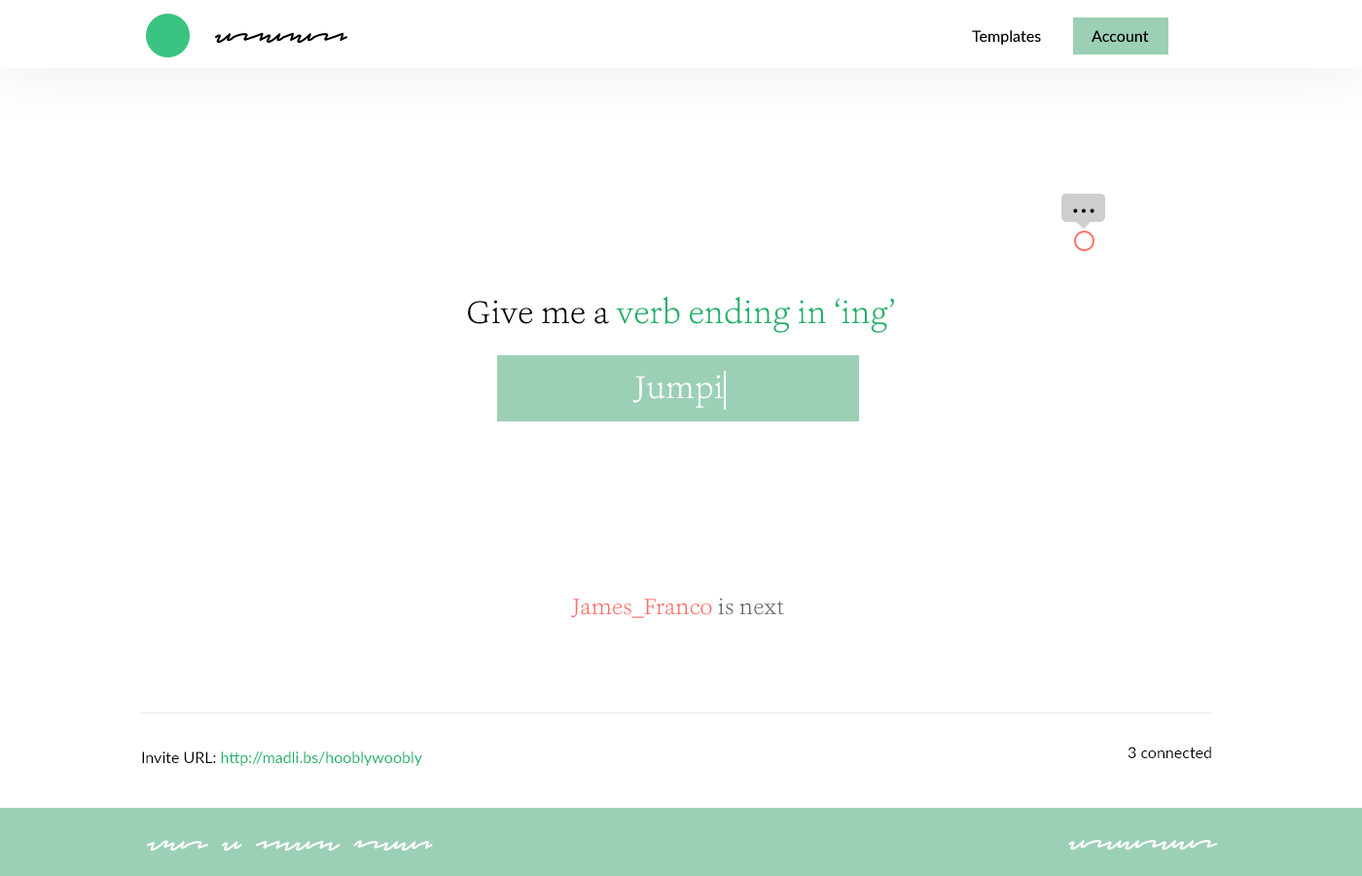
<style>
.page{position:relative;width:1362px;height:876px;background:#ffffff}
.page>*{position:absolute;margin:0}
.t1{font:38.9px "Ashbury-Light";color:#000000}
.t2{font:33.1px "Ashbury-Light";color:#18b267}
.t3{font:33.1px "Ashbury-Light";color:#000000}
.t4{font:33.1px "Ashbury-Light";color:#ffffff}
.t5{font:23.3px "Ashbury-Light"}
.t6{font:15.6px "Lato-Regular";color:#000000}
.t7{font:15.6px "Lato-Regular";color:#18b267}
</style>
<div class="page">
<p class="t1" style="left:1073px;top:208px;width:21px;height:5px">...</p>
<p class="t2" style="left:468px;top:296px;width:426px;height:37px"><span class="t3">Give me a </span>verb ending in ‘ing’</p>
<p class="t4" style="left:632px;top:375px;width:91px;height:33px">Jumpi</p>
<p class="t5" style="left:571px;top:597px;width:213px;height:21px">James_Franco is next</p>
<p class="t6" style="left:1127px;top:746px;width:84px;height:12px">3 connected</p>
<p class="t7" style="left:142px;top:751px;width:280px;height:15px"><span class="t6">Invite URL: </span>http://madli.bs/hooblywoobly</p>
</div>
